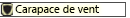
<style>
.page{position:relative;width:130px;height:18px;background:#ffffff}
.page>*{position:absolute;margin:0}
.t1{font:10.9px "LaoUI";color:#000000}
</style>
<div class="page">
<p class="t1" style="left:15px;top:5px;width:84px;height:10px">Carapace de vent</p>
</div>
